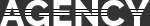
<style>
.page{position:relative;width:150px;height:26px;background:#333333}
.page>*{position:absolute;margin:0}
.t1{font:36.4px "Raleway-ExtraBold";color:#ffffff}
</style>
<div class="page">
<p class="t1" style="left:0px;top:0px;width:149px;height:27px">AGENCY</p>
</div>
